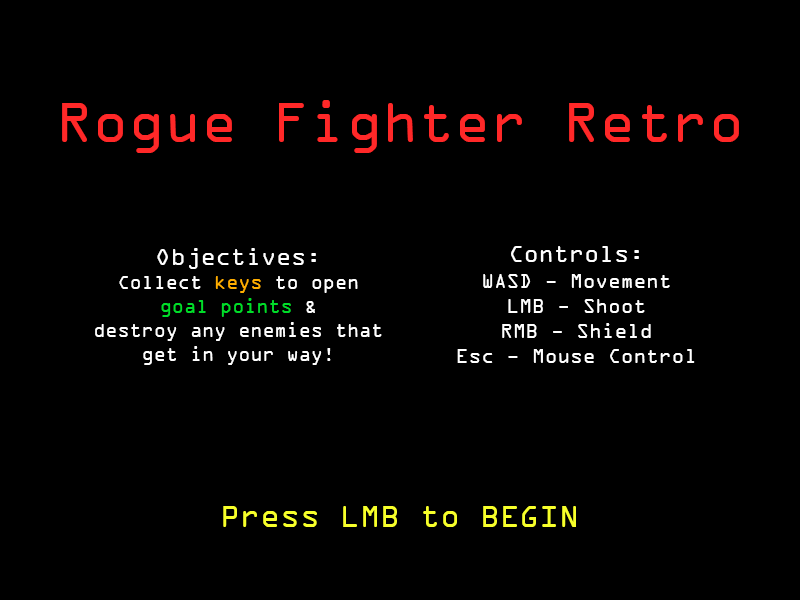
<style>
.page{position:relative;width:800px;height:600px;background:#000000}
.page>*{position:absolute;margin:0}
.t1{font:60px "OCRAExtended";color:#ff2828}
.t2{font:21px "OCRAExtended";color:#ffffff}
.t3{font:25px "OCRAExtended";color:#ffffff}
.t4{font:20px "OCRAExtended";color:#ffffff}
.t5{font:20px "OCRAExtended";color:#ffae00}
.t6{font:20px "OCRAExtended";color:#00dd2a}
.t7{font:33px "OCRAExtended";color:#f7ff2a}
</style>
<div class="page">
<p class="t1" style="left:62px;top:100px;width:677px;height:53px">Rogue Fighter Retro</p>
<p class="t2" style="left:457px;top:246px;width:238px;height:117px;text-align:center"><span class="t3">Controls:<br></span>WASD - Movement<br>LMB - Shoot<br>RMB - Shield<br>Esc - Mouse Control</p>
<p class="t4" style="left:95px;top:248px;width:287px;height:117px;text-align:center"><span class="t3">Objectives:<br></span>Collect <span class="t5">keys</span> to open<br><span class="t6">goal points</span> &amp;<br>destroy any enemies that<br>get in your way!</p>
<p class="t7" style="left:223px;top:506px;width:353px;height:21px">Press LMB to BEGIN</p>
</div>
